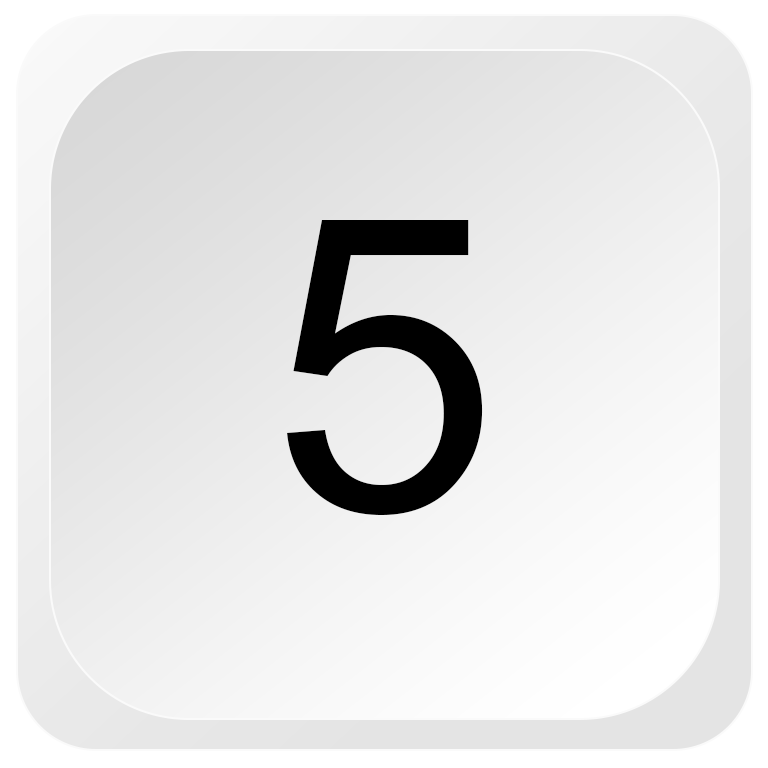
<style>
.page{position:relative;width:768px;height:768px}
.page>*{position:absolute;margin:0}
.t1{font:411px "ArialMT";color:#000000}
</style>
<div class="page">
<p class="t1" style="left:287px;top:220px;width:196px;height:295px">5</p>
</div>
